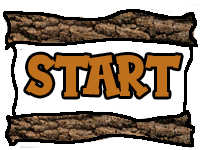
<style>
.page{position:relative;width:200px;height:150px;background:#ffffff}
.page>*{position:absolute;margin:0}
.t1{font:50px "ChocoBear";color:#be701d}
</style>
<div class="page">
<p class="t1" style="left:26px;top:54px;width:155px;height:43px">START</p>
</div>
